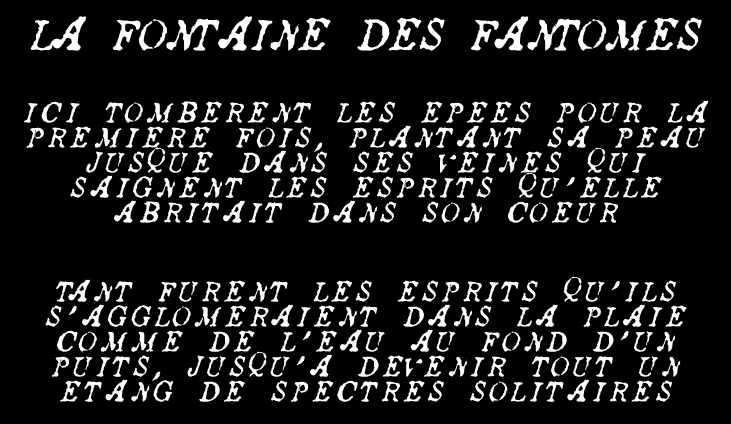
<style>
.page{position:relative;width:731px;height:424px;background:#000000}
.page>*{position:absolute;margin:0}
.t1{font:70px "AncientStory";color:#ffffff}
.t2{font:45px/25px "AncientStory";letter-spacing:0.1em;color:#ffffff}
.t3{font:45px/25px "AquilineTwo";letter-spacing:0.1em;color:#ffffff}
</style>
<div class="page">
<p class="t1" style="left:30px;top:16px;width:672px;height:35px">La Fontaine des FantOmes</p>
<p class="t2" style="left:23px;top:100px;width:686px;height:123px;text-align:center">Ici tombErent les EpEes pour la<br>premiere fois<span class="t3">,</span> plantant sa peau<br>jusque dans ses veines qui<br>saignent les esprits qu<span class="t3">'</span>elle<br>abritait dans son coeur</p>
<p class="t2" style="left:45px;top:276px;width:642px;height:126px;text-align:center">Tant furent les esprits qu<span class="t3">'</span>ils<br>s<span class="t3">'</span>agglomeraient dans la plaie<br>comme de l<span class="t3">'</span>eau au fond d<span class="t3">'</span>un<br>puits<span class="t3">,</span> jusqu<span class="t3">'</span>a devenir tout un<br>etang de spectres solitaires</p>
</div>
